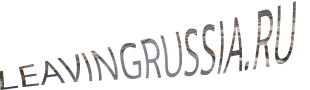
<style>
.page{position:relative;width:310px;height:90px;background:#ffffff}
.page>*{position:absolute;margin:0}
.t1{font:56.8px "OpenSans";text-transform:uppercase;scale:0.59 1}
</style>
<div class="page">
<p class="t1" style="left:0px;top:1px;width:296px;height:89px">leavingrussia.ru</p>
</div>
